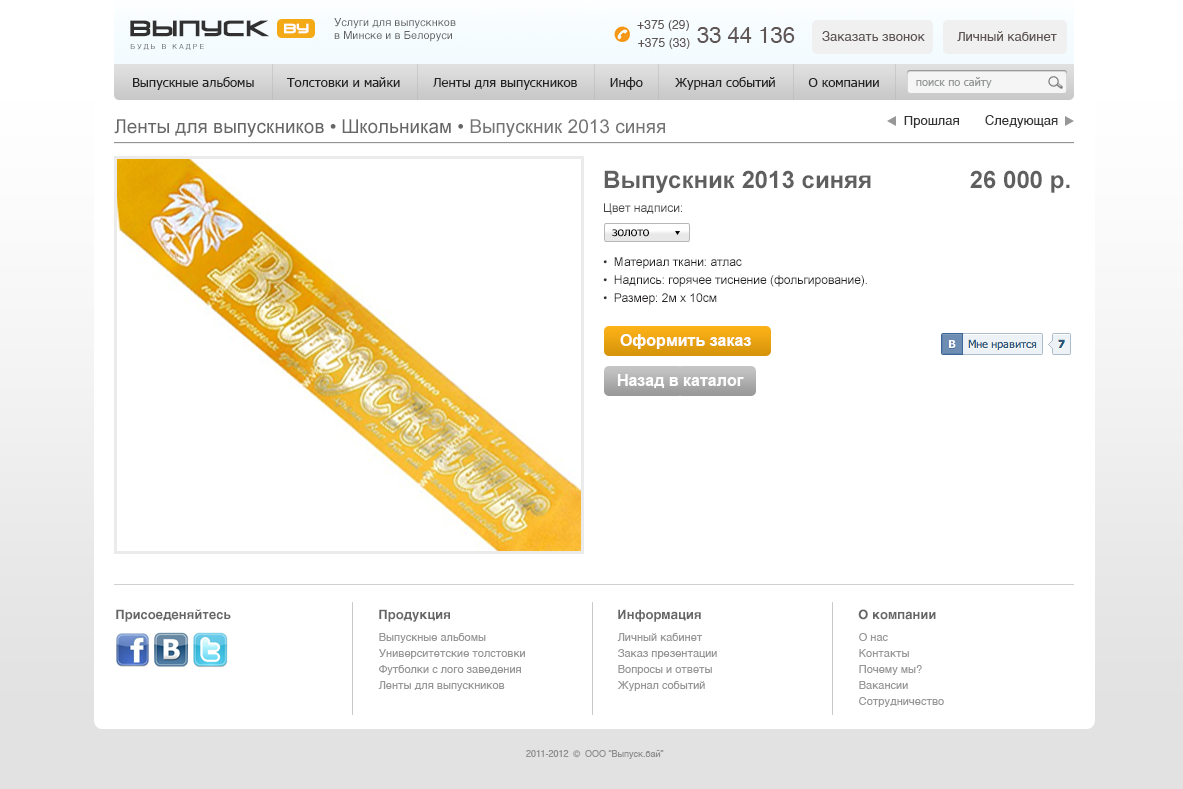
<style>
.page{position:relative;width:1183px;height:789px;background:#ffffff}
.page>*{position:absolute;margin:0}
.t1{font:21px "VenusRisingCyrillic";letter-spacing:0.01em;color:#313131;font-weight:bold}
.t2{font:12.6px "VenusRisingCyrillic";letter-spacing:0.01em;color:#ffffff;font-weight:bold}
.t3{font:11px "Helvetica";color:#616161}
.t4{font:12px "Helvetica";letter-spacing:0.01em;color:#5f5555}
.t5{font:22px "Helvetica";color:#5f5555}
.t6{font:13px "Helvetica";color:#5f5555}
.t7{font:7px "Helvetica";letter-spacing:0.3em;color:#6d6d6d;text-transform:uppercase}
.t8{font:13px "Tahoma";color:#242424}
.t9{font:11px "Tahoma";color:#979999}
.t10{font:19px "ArialMT";color:#666666}
.t11{font:19px "ArialMT";color:#747474}
.t12{font:13px "Helvetica";color:#333333}
.t13{font:12px/18px "ArialMT";color:#252020}
.t14{font:24px "Arial-BoldMT";color:#5f5f5f}
.t15{font:12px/24px "ArialMT";color:#444444}
.t16{font:12px/54px "ArialMT";color:#333333}
.t17{font:12px/54px "ArialMT";color:#252020}
.t18{font:12px/18px "ArialMT";color:#333333}
.t19{font:12px "Tahoma";color:#000000}
.t20{font:16px "Arial-BoldMT";color:#fdfdfe}
.t21{font:13px "Helvetica-Bold";color:#666666}
.t22{font:11px/16px "Helvetica";color:#979797}
.t23{font:9px "Helvetica";color:#909090}
</style>
<div class="page">
<p class="t1" style="left:130px;top:20px;width:139px;height:17px">ВЫпуск</p>
<p class="t2" style="left:284px;top:23px;width:25px;height:11px">by</p>
<p class="t3" style="left:334px;top:18px;width:122px;height:24px">Услуги для выпускнков<br>в Минске и в Белоруси</p>
<p class="t4" style="left:637px;top:20px;width:52px;height:11px">+375 (29)</p>
<p class="t5" style="left:697px;top:27px;width:98px;height:16px">33 44 136</p>
<p class="t4" style="left:638px;top:38px;width:52px;height:11px">+375 (33)</p>
<p class="t6" style="left:822px;top:31px;width:235px;height:10px">Заказать звонок         Личный кабинет</p>
<p class="t7" style="left:130px;top:44px;width:74px;height:6px">будь в кадре</p>
<p class="t8" style="left:133px;top:77px;width:746px;height:13px">Выпускные альбомы        Толстовки и майки        Ленты для выпускников        Инфо        Журнал событий        О компании</p>
<p class="t9" style="left:916px;top:77px;width:76px;height:11px">поиск по сайту</p>
<p class="t10" style="left:114px;top:119px;width:551px;height:18px">Ленты для выпускников • Школьникам • <span class="t11">Выпускник 2013 синяя</span></p>
<p class="t12" style="left:904px;top:115px;width:154px;height:13px">Прошлая       Следующая</p>
<p class="t13" style="left:603px;top:170px;width:467px;height:135px"><span class="t14">Выпускник 2013 синяя    26 000 р.<br></span><span class="t15">Цвет надписи:<br></span><span class="t16">•  </span><span class="t17">Материал ткани: атлас<br></span><span class="t18">•  </span>Надпись: горячее тиснение (фольгирование).<br><span class="t18">•  </span>Размер: 2м х 10см</p>
<p class="t19" style="left:612px;top:229px;width:37px;height:8px">золото</p>
<p class="t20" style="left:620px;top:334px;width:131px;height:15px">Оформить заказ</p>
<p class="t20" style="left:617px;top:374px;width:127px;height:14px">Назад в каталог</p>
<p class="t21" style="left:116px;top:609px;width:115px;height:13px">Присоеденяйтесь</p>
<p class="t21" style="left:379px;top:609px;width:71px;height:13px">Продукция</p>
<p class="t21" style="left:618px;top:609px;width:83px;height:13px">Информация</p>
<p class="t21" style="left:858px;top:609px;width:78px;height:11px">О компании</p>
<p class="t22" style="left:378px;top:633px;width:147px;height:58px">Выпускные альбомы<br>Университетские толстовки<br>Футболки с лого заведения<br>Ленты для выпускников</p>
<p class="t22" style="left:617px;top:633px;width:100px;height:58px">Личный кабинет<br>Заказ презентации<br>Вопросы и ответы<br>Журнал событий</p>
<p class="t22" style="left:859px;top:633px;width:85px;height:74px">О нас<br>Контакты<br>Почему мы? <br>Вакансии<br>Сотрудничество</p>
<p class="t23" style="left:526px;top:750px;width:138px;height:9px">2011-2012  ©  ООО “Выпуск.бай”</p>
</div>
